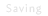
<style>
.page{position:relative;width:48px;height:16px;background:#ffffff}
.page>*{position:absolute;margin:0}
.t1{font:11.2px "Amira-Light";letter-spacing:0.1em;color:#e5e5e5}
</style>
<div class="page">
<p class="t1" style="left:6px;top:4px;width:36px;height:11px">Saving</p>
</div>
